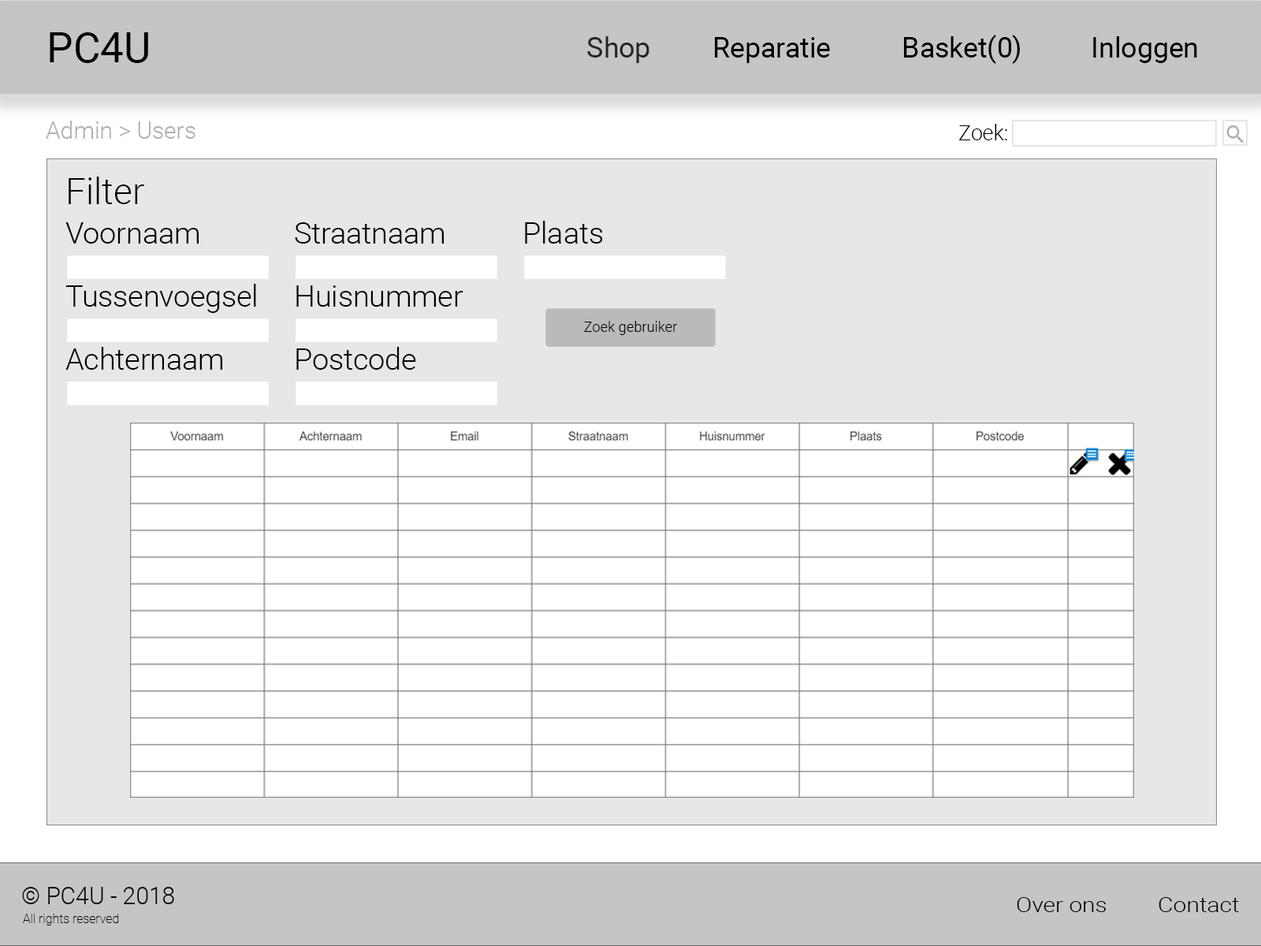
<style>
.page{position:relative;width:1261px;height:946px;background:#ffffff}
.page>*{position:absolute;margin:0}
.t1{font:42px "Roboto-Regular";color:#000000}
.t2{font:28px "Roboto-Regular";color:#000000}
.t3{font:28px "Roboto-Regular";color:#262626}
.t4{font:23.6px "Roboto-Light";color:#afafaf}
.t5{font:21px "Roboto-Light";color:#000000}
.t6{font:36.1px "Roboto-Light";color:#000000}
.t7{font:29.6px "Roboto-Light";color:#000000}
.t8{font:14.5px "Roboto-Light";color:#000000}
.t9{font:23.6px "Roboto-Light";color:#000000}
.t10{font:20.4px "Roboto-Light";color:#000000;scale:1.16 1}
.t11{font:12.6px "Roboto-Thin";color:#000000}
</style>
<div class="page">
<p class="t1" style="left:50px;top:32px;width:98px;height:31px">PC4U</p>
<p class="t2" style="left:587px;top:35px;width:610px;height:29px"><span class="t3">Shop</span>  Reparatie   Basket(0)   Inloggen</p>
<p class="t4" style="left:46px;top:121px;width:149px;height:18px">Admin &gt; Users</p>
<p class="t5" style="left:959px;top:124px;width:48px;height:16px">Zoek:</p>
<p class="t6" style="left:69px;top:177px;width:75px;height:27px">Filter</p>
<p class="t7" style="left:525px;top:221px;width:78px;height:23px">Plaats</p>
<p class="t7" style="left:65px;top:222px;width:134px;height:22px">Voornaam</p>
<p class="t7" style="left:295px;top:222px;width:149px;height:22px">Straatnaam</p>
<p class="t7" style="left:65px;top:284px;width:191px;height:29px">Tussenvoegsel</p>
<p class="t7" style="left:296px;top:285px;width:167px;height:22px">Huisnummer</p>
<p class="t8" style="left:584px;top:321px;width:94px;height:14px">Zoek gebruiker</p>
<p class="t8" style="left:584px;top:321px;width:94px;height:14px">Zoek gebruiker</p>
<p class="t7" style="left:65px;top:347px;width:158px;height:23px">Achternaam</p>
<p class="t7" style="left:296px;top:347px;width:120px;height:23px">Postcode</p>
<p class="t9" style="left:22px;top:887px;width:152px;height:17px">© PC4U - 2018</p>
<p class="t10" style="left:1017px;top:897px;width:222px;height:15px">Over ons  Contact</p>
<p class="t11" style="left:23px;top:913px;width:96px;height:12px">All rights reserved</p>
</div>
